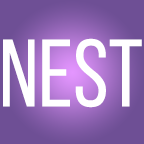
<style>
.page{position:relative;width:144px;height:144px;background:#6e4f95}
.page>*{position:absolute;margin:0}
.t1{font:95.8px "BebasNeueRegular";color:#ffffff}
</style>
<div class="page">
<p class="t1" style="left:3px;top:38px;width:139px;height:70px">nest</p>
</div>
